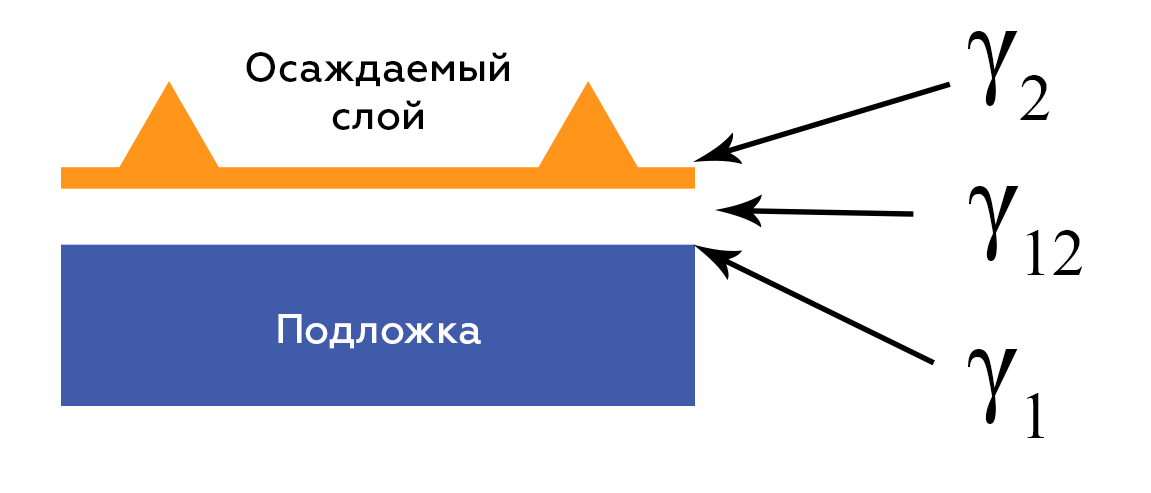
<style>
.page{position:relative;width:1151px;height:493px;background:#ffffff}
.page>*{position:absolute;margin:0}
.t1{font:114px "TimesNewRomanPSMT";color:#000000}
.t2{font:40px "Geometria-Medium";color:#000000}
.t3{font:40px "Geometria-Medium";color:#ffffff}
</style>
<div class="page">
<p class="t1" style="left:968px;top:31px;width:82px;height:89px">γ2</p>
<p class="t2" style="left:246px;top:52px;width:263px;height:78px;text-align:center">Осаждаемый<br>слой</p>
<p class="t1" style="left:969px;top:186px;width:114px;height:89px">γ12</p>
<p class="t3" style="left:278px;top:314px;width:203px;height:35px">Подложка</p>
<p class="t1" style="left:968px;top:349px;width:76px;height:89px">γ1</p>
</div>
